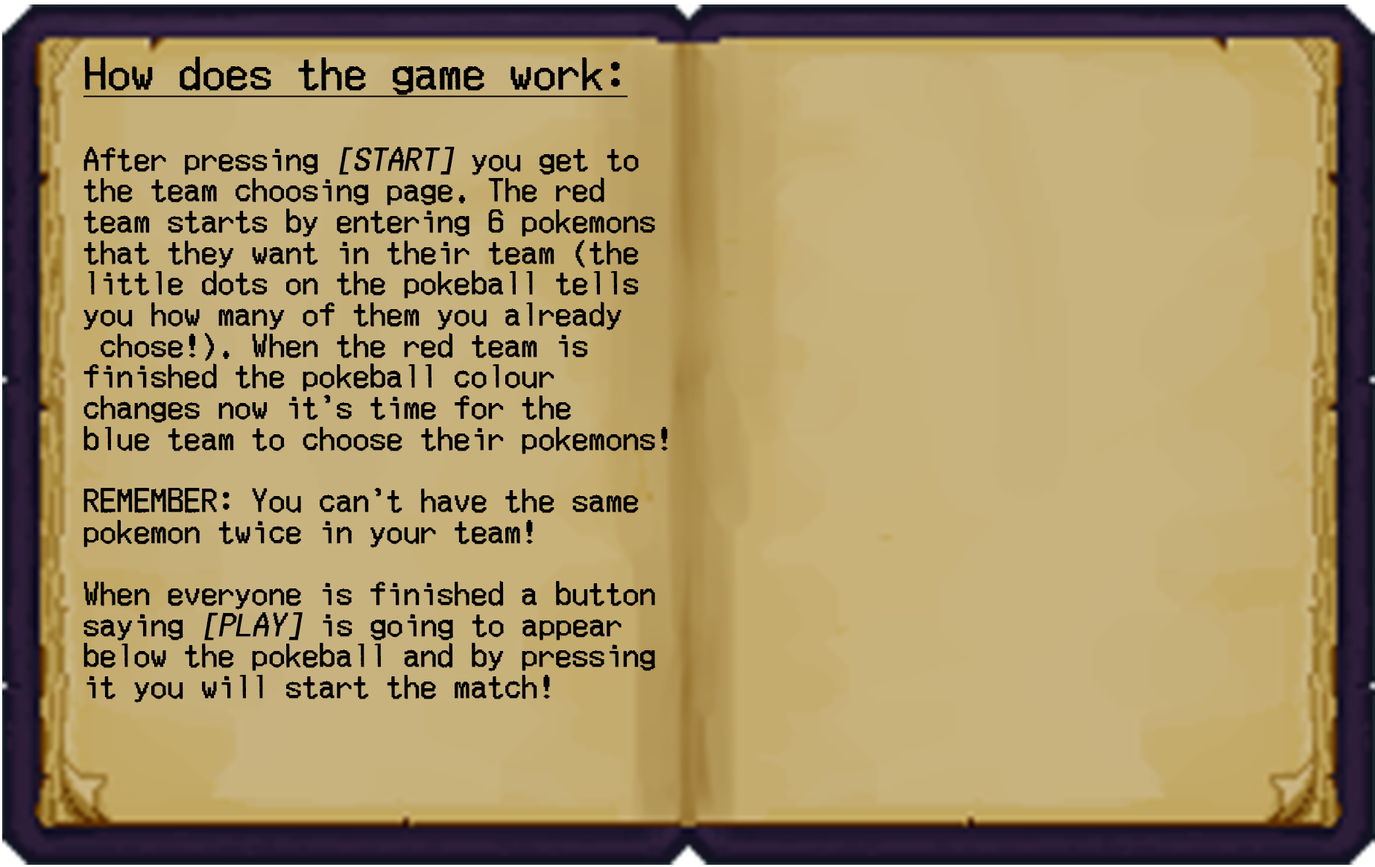
<style>
.page{position:relative;width:1375px;height:867px}
.page>*{position:absolute;margin:0}
.t1{font:32.2px "MerchantCopyDoublesize";color:#000000;font-weight:bold;text-decoration:underline}
.t2{font:22.9px/31px "MerchantCopyDoublesize";color:#000000;font-weight:bold}
.t3{font:22.9px/31px "MerchantCopyDoublesize";color:#000000;font-weight:bold;font-style:italic}
</style>
<div class="page">
<p class="t1" style="left:83px;top:57px;width:545px;height:41px">How does the game work:</p>
<p class="t2" style="left:83px;top:147px;width:585px;height:556px">After pressing <span class="t3">[START] </span>you get to <br>the team choosing page. The red<br>team starts by entering 6 pokemons <br>that they want in their team (the<br>little dots on the pokeball tells<br>you how many of them you already<br> chose!). When the red team is<br>finished the pokeball colour<br>changes now it’s time for the <br>blue team to choose their pokemons!<br><br>REMEMBER: You can’t have the same<br>pokemon twice in your team!<br><br>When everyone is finished a button<br>saying <span class="t3">[PLAY] </span>is going to appear<br>below the pokeball and by pressing<br>it you will start the match!</p>
</div>
